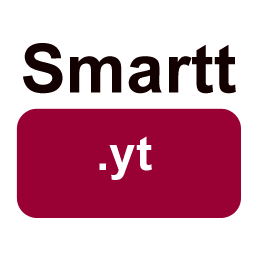
<style>
.page{position:relative;width:256px;height:256px;background:#ffffff}
.page>*{position:absolute;margin:0}
.t1{font:68px "Arial-BoldMT";color:#130000}
.t2{font:48px "Arial-BoldMT";color:#ffffff}
</style>
<div class="page">
<p class="t1" style="left:23px;top:43px;width:213px;height:51px">Smartt</p>
<p class="t2" style="left:99px;top:136px;width:53px;height:44px">.yt</p>
</div>
